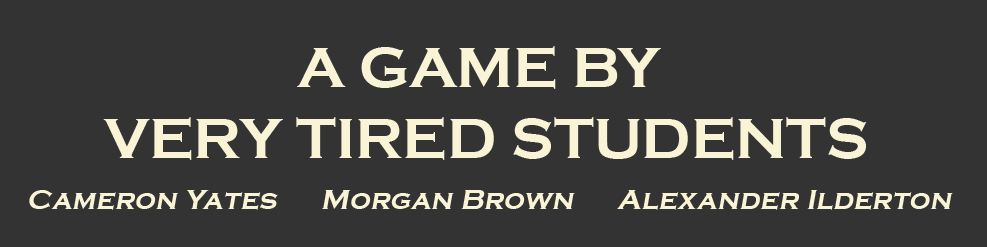
<style>
.page{position:relative;width:987px;height:247px;background:#333333}
.page>*{position:absolute;margin:0}
.t1{font:58.6px "CopperplateGothic-Bold";color:#f9f4d6;text-transform:uppercase}
.t2{font:29.3px "CopperplateGothic-Bold";color:#f9f4d6;font-style:italic}
</style>
<div class="page">
<p class="t1" style="left:103px;top:46px;width:764px;height:114px;text-align:center">A Game By <br>Very Tired Students</p>
<p class="t2" style="left:29px;top:190px;width:924px;height:20px">Cameron Yates      Morgan Brown      Alexander Ilderton</p>
</div>
